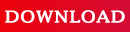
<style>
.page{position:relative;width:130px;height:32px}
.page>*{position:absolute;margin:0}
.t1{font:16px "LucidaFax";color:#ffffff;text-transform:uppercase;font-weight:bold;scale:1.2 1}
</style>
<div class="page">
<p class="t1" style="left:5px;top:10px;width:120px;height:13px">Download</p>
</div>
